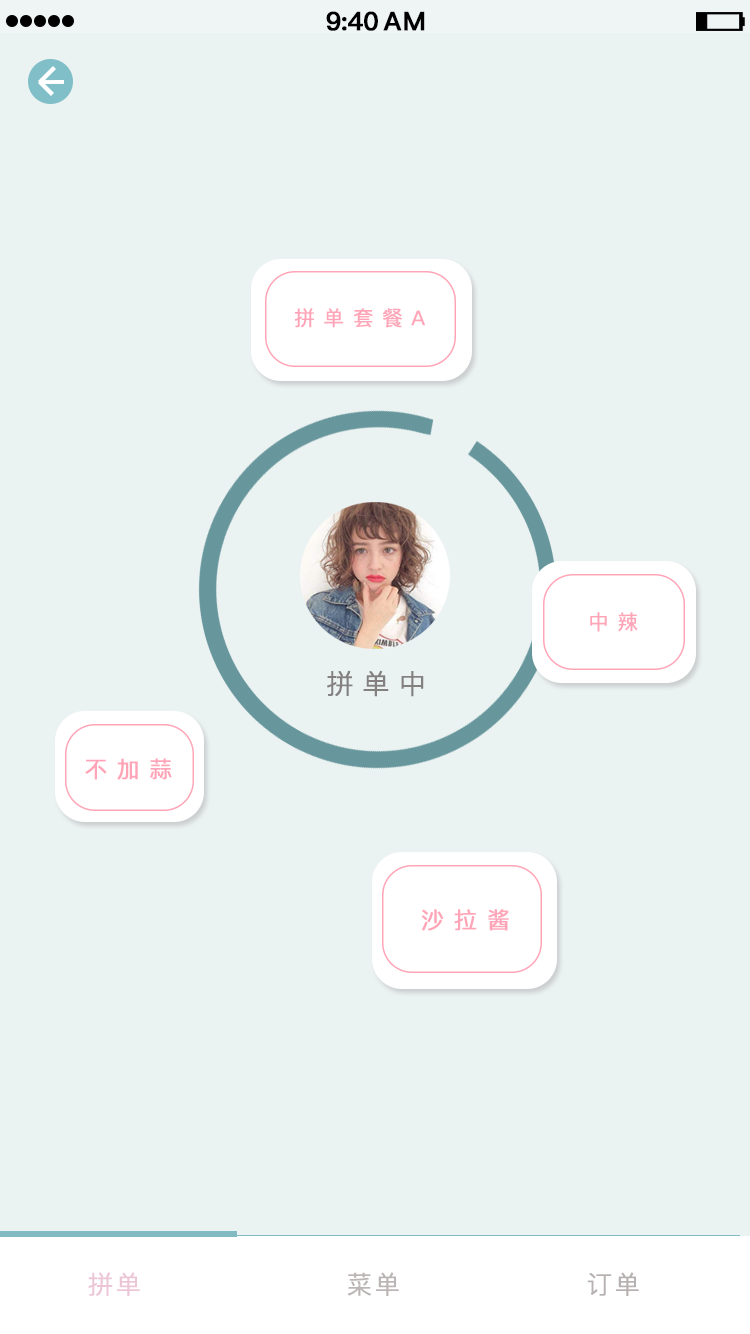
<style>
.page{position:relative;width:750px;height:1334px;background:#ebf2f2}
.page>*{position:absolute;margin:0}
.t1{font:25.4px "PingFang-SC-Bold";letter-spacing:-0.028em;color:#000000;font-weight:bold}
.t2{font:25.4px "PingFang-SC-Bold";letter-spacing:0.052em;color:#000000;font-weight:bold}
.t3{font:20.4px "PingFang-SC-Medium";letter-spacing:0.412em;color:#ffa5b7;font-weight:bold}
.t4{font:27px "PingFang-SC-Regular";letter-spacing:0.312em;color:#838080;font-weight:bold}
.t5{font:22.6px "PingFang-SC-Medium";letter-spacing:0.412em;color:#ffa5b7;font-weight:bold}
.t6{font:22.9px "PingFang-SC-Medium";letter-spacing:0.412em;color:#ffa5b7;font-weight:bold}
.t7{font:25px "PingFang-SC-Regular";letter-spacing:0.085em;color:#ecc6d7;font-weight:bold}
.t8{font:25px "PingFang-SC-Regular";letter-spacing:0.085em;color:#bbb5b5;font-weight:bold}
.t9{font:25px "PingFang-SC-Regular";letter-spacing:0.085em;color:#b7b1b1;font-weight:bold}
</style>
<div class="page">
<p class="t1" style="left:326px;top:11px;width:52px;height:20px">9:40</p>
<p class="t2" style="left:383px;top:11px;width:42px;height:20px">AM</p>
<p class="t3" style="left:294px;top:308px;width:131px;height:20px">拼单套餐A</p>
<p class="t3" style="left:590px;top:612px;width:48px;height:20px">中辣</p>
<p class="t4" style="left:327px;top:670px;width:97px;height:27px">拼单中</p>
<p class="t5" style="left:85px;top:758px;width:87px;height:22px">不加蒜</p>
<p class="t6" style="left:421px;top:909px;width:88px;height:22px">沙拉酱</p>
<p class="t7" style="left:88px;top:1272px;width:52px;height:24px">拼单</p>
<p class="t8" style="left:348px;top:1272px;width:51px;height:24px">菜单</p>
<p class="t9" style="left:587px;top:1272px;width:52px;height:24px">订单</p>
</div>
